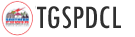
<style>
.page{position:relative;width:135px;height:37px;background:#ffffff}
.page>*{position:absolute;margin:0}
.t1{font:34px "TwCenMT-Condensed";color:#2f2f2f}
</style>
<div class="page">
<p class="t1" style="left:37px;top:6px;width:84px;height:23px">TGSPDCL</p>
</div>
